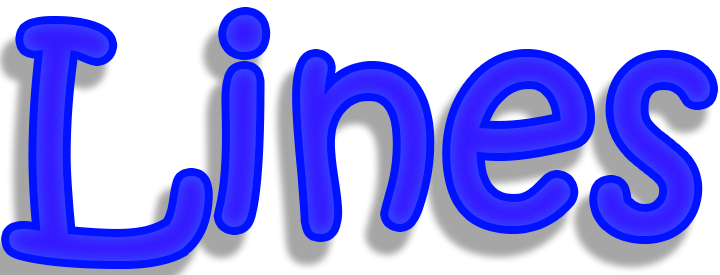
<style>
.page{position:relative;width:720px;height:275px;background:#ffffff}
.page>*{position:absolute;margin:0}
.t1{font:270px "KristenITC-Regular";color:#3525ff}
</style>
<div class="page">
<p class="t1" style="left:9px;top:15px;width:701px;height:246px">Lines</p>
</div>
